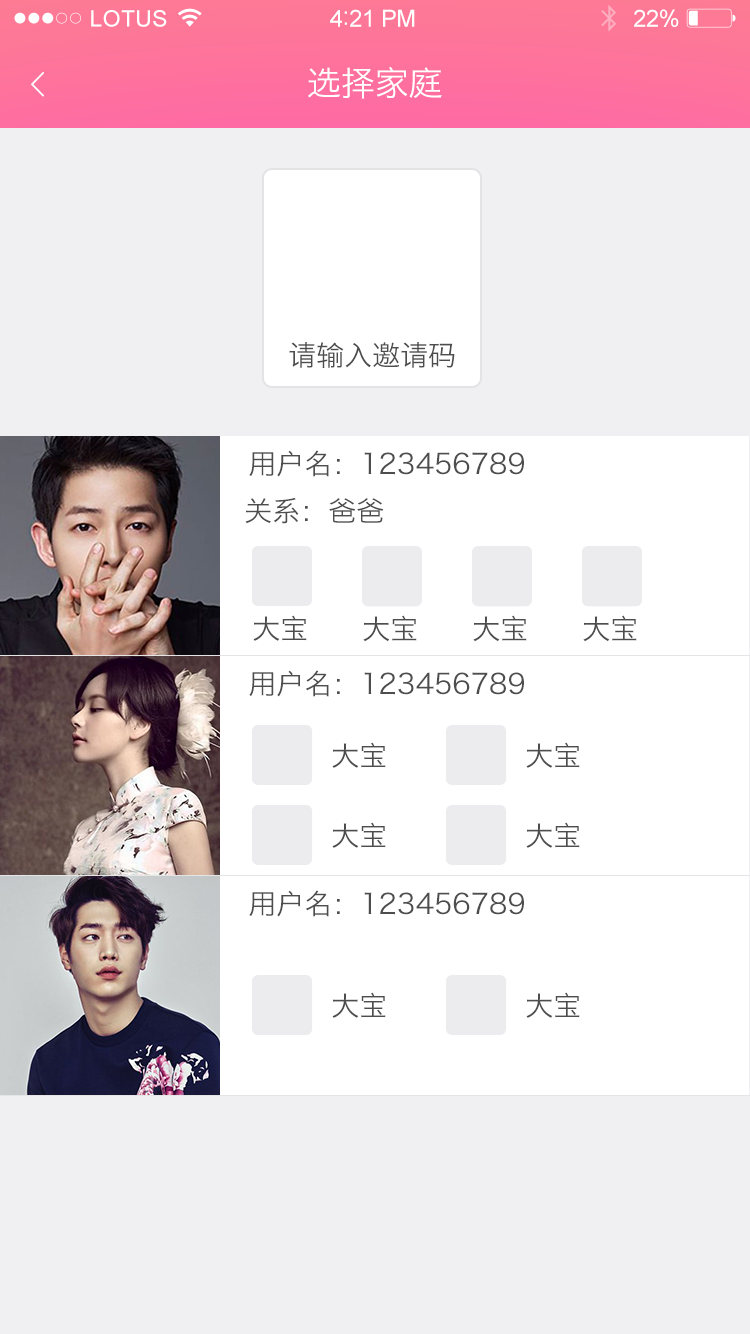
<style>
.page{position:relative;width:750px;height:1334px;background:#ffffff}
.page>*{position:absolute;margin:0}
.t1{font:22.6px "ArialMT";letter-spacing:0.02em;color:#ffffff}
.t2{font:23.6px "ArialMT";letter-spacing:-0.02em;color:#ffffff}
.t3{font:25.6px "ArialMT";letter-spacing:-0.02em;color:#ffffff}
.t4{font:34px "HiraginoSansGB-W3";color:#ffffff}
.t5{font:28px "HiraginoSansGB-W3";color:#4d4d4d}
.t6{font:28.1px "HiraginoSansGB-W3";color:#4d4d4d}
</style>
<div class="page">
<p class="t1" style="left:91px;top:10px;width:76px;height:17px">LOTUS</p>
<p class="t2" style="left:330px;top:9px;width:85px;height:18px">4<span class="t3">:</span>21 PM</p>
<p class="t2" style="left:634px;top:9px;width:45px;height:18px">22%</p>
<p class="t4" style="left:308px;top:67px;width:134px;height:32px">选择家庭</p>
<p class="t5" style="left:289px;top:342px;width:166px;height:26px">请输入邀请码</p>
<p class="t5" style="left:249px;top:450px;width:275px;height:27px">用户名：123456789</p>
<p class="t5" style="left:245px;top:497px;width:139px;height:27px">关系：爸爸</p>
<p class="t5" style="left:253px;top:615px;width:54px;height:26px">大宝</p>
<p class="t6" style="left:363px;top:615px;width:54px;height:27px">大宝</p>
<p class="t6" style="left:473px;top:615px;width:54px;height:27px">大宝</p>
<p class="t6" style="left:583px;top:615px;width:54px;height:27px">大宝</p>
<p class="t5" style="left:249px;top:670px;width:275px;height:27px">用户名：123456789</p>
<p class="t5" style="left:332px;top:742px;width:54px;height:26px">大宝</p>
<p class="t5" style="left:526px;top:742px;width:54px;height:26px">大宝</p>
<p class="t5" style="left:332px;top:822px;width:54px;height:26px">大宝</p>
<p class="t5" style="left:526px;top:822px;width:54px;height:26px">大宝</p>
<p class="t5" style="left:249px;top:890px;width:275px;height:27px">用户名：123456789</p>
<p class="t5" style="left:332px;top:992px;width:54px;height:26px">大宝</p>
<p class="t5" style="left:526px;top:992px;width:54px;height:26px">大宝</p>
</div>
